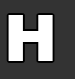
<style>
.page{position:relative;width:75px;height:79px;background:#333333}
.page>*{position:absolute;margin:0}
.t1{font:64px "Arial-Black";color:#ffffff}
</style>
<div class="page">
<p class="t1" style="left:8px;top:15px;width:45px;height:46px">H</p>
</div>
